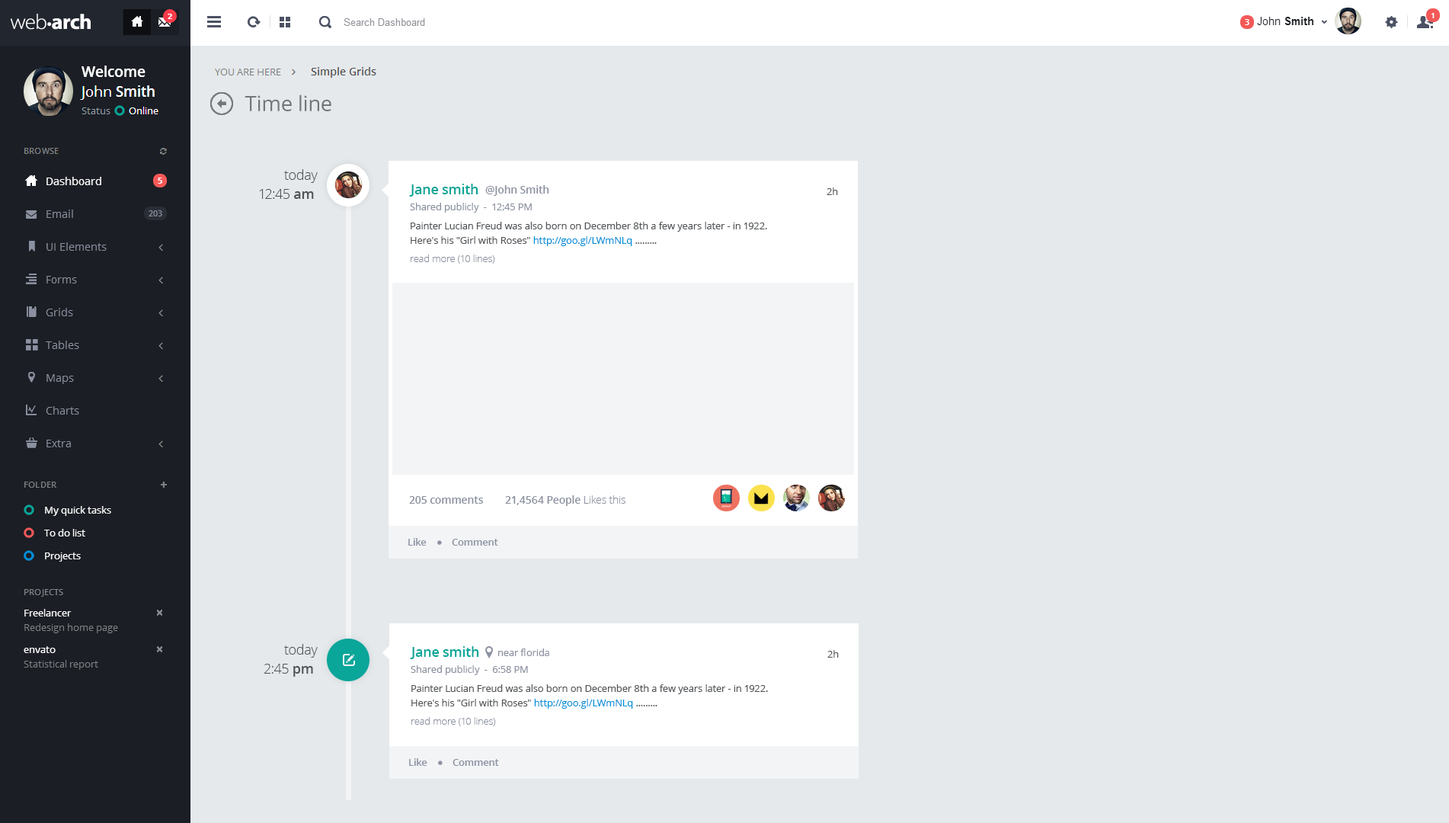
<style>
.page{position:relative;width:1449px;height:823px;background:#e5e9ec}
.page>*{position:absolute;margin:0}
.t1{font:13.7px "OpenSans-Light";letter-spacing:-0.01em;color:#505458}
.t2{font:13.7px "OpenSans-Semibold";letter-spacing:-0.01em;color:#0aa699}
.t3{font:10.7px "OpenSans-Semibold";letter-spacing:-0.01em;color:#8b91a0}
.t4{font:13.7px "OpenSans-Semibold";letter-spacing:-0.01em;color:#505458}
.t5{font:9.9px "OpenSans";letter-spacing:-0.01em;color:#505458}
.t6{font:9.9px "OpenSans";letter-spacing:-0.01em;color:#8b91a0}
.t7{font:9.9px/14.5px "OpenSans";letter-spacing:-0.01em;color:#505458}
.t8{font:9.9px/14.5px "OpenSans";letter-spacing:-0.01em;color:#0090d9}
.t9{font:9.9px "OpenSans-Light";letter-spacing:-0.01em;color:#8b91a0}
.t10{font:10.7px "OpenSans-Light";letter-spacing:-0.01em;color:#8b91a0}
.t11{font:9.9px "OpenSans-Semibold";letter-spacing:-0.01em;color:#8b91a0}
</style>
<div class="page">
<p class="t1" style="left:284px;top:169px;width:34px;height:14px">today</p>
<p class="t2" style="left:409px;top:184px;width:69px;height:13px">Jane smith</p>
<p class="t3" style="left:485px;top:185px;width:64px;height:11px">@John Smith</p>
<p class="t1" style="left:259px;top:189px;width:55px;height:10px">12:45<span class="t4"> am</span></p>
<p class="t5" style="left:827px;top:187px;width:11px;height:8px">2h</p>
<p class="t6" style="left:410px;top:203px;width:122px;height:10px">Shared publicly  -  12:45 PM</p>
<p class="t7" style="left:411px;top:222px;width:356px;height:24px">Painter Lucian Freud was also born on December 8th a few years later - in 1922.<br>Here's his "Girl with Roses" <span class="t8">http://goo.gl/LWmNLq</span> .........<br>representing Kitty, the daughter of Jacob Epstein and Kathleen</p>
<p class="t9" style="left:411px;top:254px;width:84px;height:10px">read more (10 lines)</p>
<p class="t3" style="left:409px;top:496px;width:74px;height:8px">205 comments</p>
<p class="t3" style="left:505px;top:495px;width:121px;height:11px">21,4564 People <span class="t10">Likes this</span></p>
<p class="t11" style="left:408px;top:538px;width:19px;height:8px">Like</p>
<p class="t11" style="left:452px;top:539px;width:46px;height:7px">Comment</p>
<p class="t1" style="left:284px;top:644px;width:34px;height:14px">today</p>
<p class="t2" style="left:410px;top:646px;width:69px;height:13px">Jane smith</p>
<p class="t6" style="left:498px;top:648px;width:51px;height:8px">near florida</p>
<p class="t5" style="left:827px;top:650px;width:12px;height:8px">2h</p>
<p class="t1" style="left:264px;top:664px;width:49px;height:13px">2:45<span class="t4"> pm</span></p>
<p class="t6" style="left:411px;top:665px;width:117px;height:10px">Shared publicly  -  6:58 PM</p>
<p class="t7" style="left:411px;top:684px;width:357px;height:25px">Painter Lucian Freud was also born on December 8th a few years later - in 1922.<br>Here's his "Girl with Roses" <span class="t8">http://goo.gl/LWmNLq</span> .........<br>representing Kitty, the daughter of Jacob Epstein and Kathleen</p>
<p class="t9" style="left:411px;top:717px;width:85px;height:9px">read more (10 lines)</p>
<p class="t11" style="left:409px;top:758px;width:18px;height:8px">Like</p>
<p class="t11" style="left:453px;top:759px;width:46px;height:7px">Comment</p>
</div>
